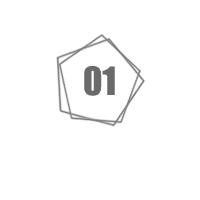
<style>
.page{position:relative;width:200px;height:200px;background:#ffffff}
.page>*{position:absolute;margin:0}
.t1{font:36px "Impact";color:#6b6a6a}
</style>
<div class="page">
<p class="t1" style="left:84px;top:65px;width:31px;height:31px">01</p>
</div>
